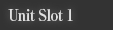
<style>
.page{position:relative;width:113px;height:30px;background:#333333}
.page>*{position:absolute;margin:0}
.t1{font:16px "RyuminPro-ExBold";letter-spacing:-0.04em;color:#dfdfdf;scale:0.9 1}
</style>
<div class="page">
<p class="t1" style="left:8px;top:8px;width:65px;height:13px">Unit Slot 1</p>
</div>
